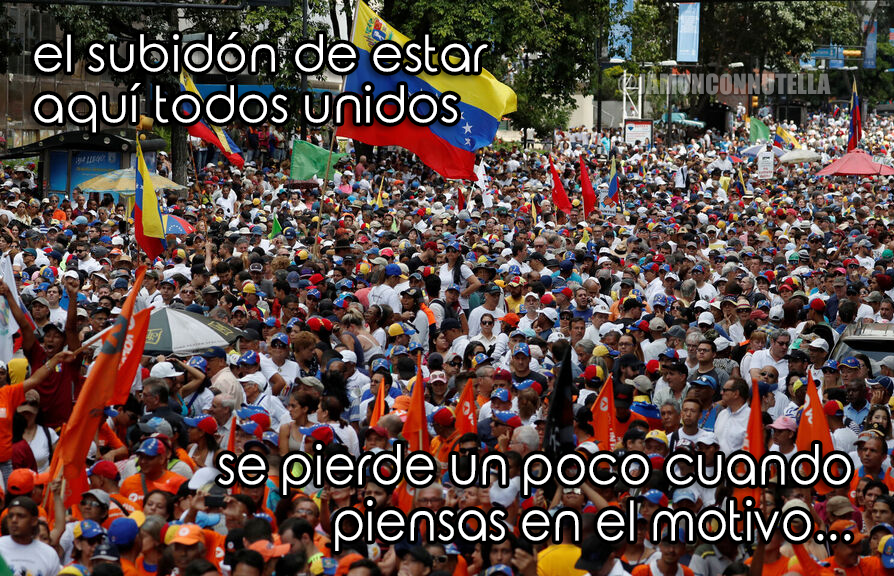
<style>
.page{position:relative;width:894px;height:576px}
.page>*{position:absolute;margin:0}
.t1{font:49.6px "RoundedElegance-Regular";color:#ffffff}
.t2{font:25.6px "Impact"}
.t3{font:53.9px "RoundedElegance-Regular";color:#ffffff;scale:0.9 1}
</style>
<div class="page">
<p class="t1" style="left:34px;top:32px;width:454px;height:101px">el subidón de estar<br>aquí todos unidos</p>
<p class="t2" style="left:618px;top:73px;width:213px;height:22px">@JAMONCONNUTELLA</p>
<p class="t3" style="left:218px;top:444px;width:633px;height:107px;text-align:right">se pierde un poco cuando<br>piensas en el motivo...</p>
</div>
